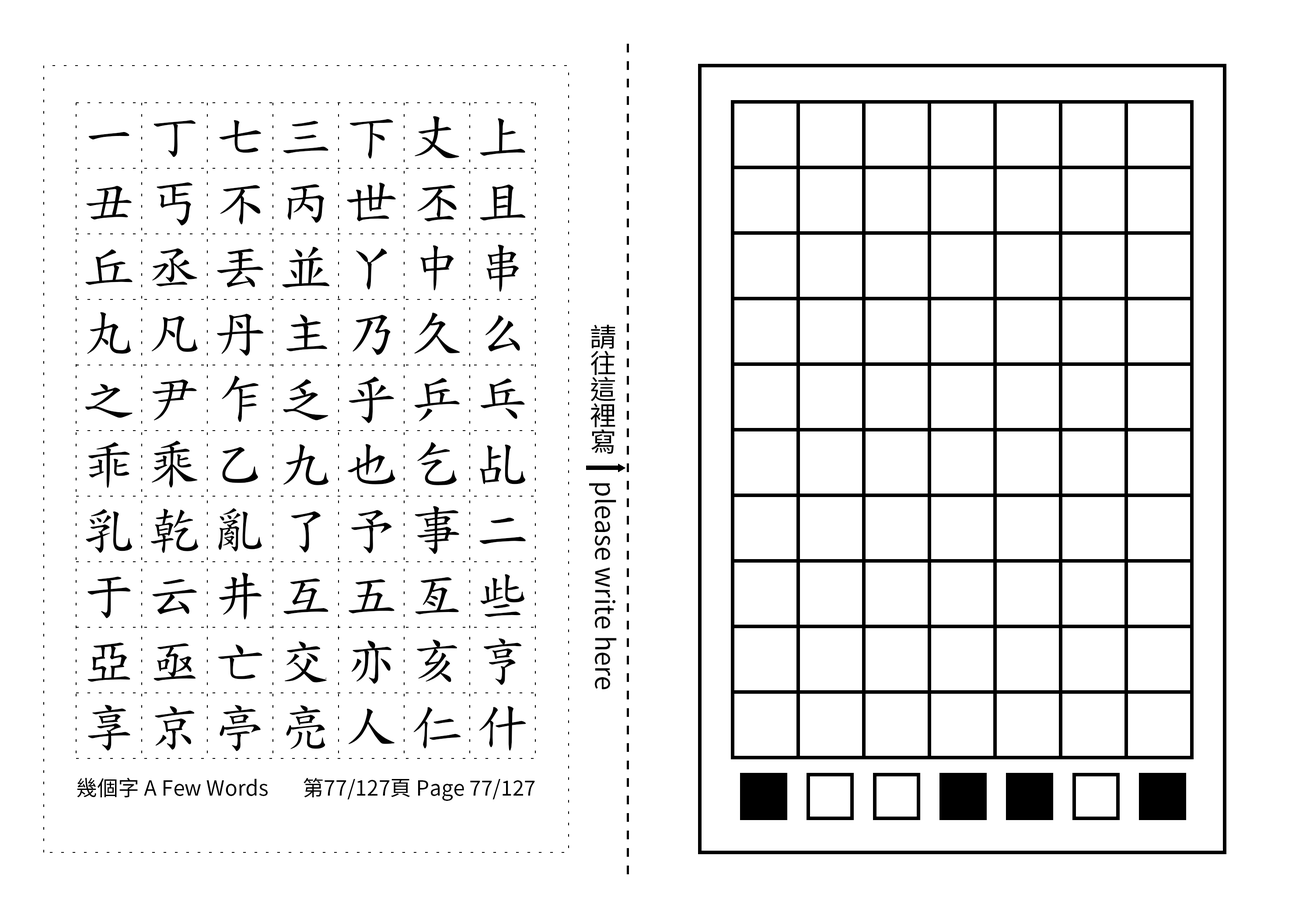
<style>
.page{position:relative;width:1299px;height:918px;background:#ffffff}
.page>*{position:absolute;margin:0}
.t1{font:52.5px/65.6px "TW-Kai-98_1";letter-spacing:0.25em;color:#000000}
.t2{font:26.2px "SourceHanSansTC-Regular";color:#000000}
.t3{font:21px "SourceHanSansTC-Regular";color:#000000}
</style>
<div class="page">
<p class="t1" style="left:85px;top:116px;width:441px;height:636px;text-align:center">一丁七三下丈上丑丐不丙世丕且丘丞丟並丫中串丸凡丹主乃久么之尹乍乏乎乒乓乖乘乙九也乞乩乳乾亂了予事二于云井互五亙些亞亟亡交亦亥亨享京亭亮人仁什</p>
<p class="t2" style="left:589px;top:324px;width:28px;height:366px;text-align:center">請往這裡寫　please write here</p>
<p class="t3" style="left:77px;top:778px;width:191px;height:20px">幾個字 A Few Words</p>
<p class="t3" style="left:303px;top:778px;width:232px;height:23px">第77/127頁 Page 77/127</p>
</div>
